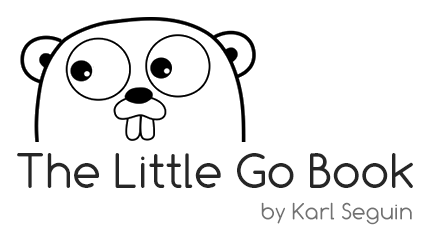
<style>
.page{position:relative;width:436px;height:244px;background:#ffffff}
.page>*{position:absolute;margin:0}
.t1{font:50px "Comfortaa";color:#262626}
.t2{font:24px "Comfortaa";color:#717171}
</style>
<div class="page">
<p class="t1" style="left:17px;top:153px;width:396px;height:35px">The Little Go Book</p>
<p class="t2" style="left:261px;top:202px;width:151px;height:23px">by Karl Seguin</p>
</div>
